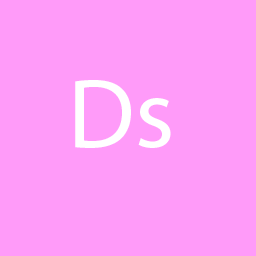
<style>
.page{position:relative;width:256px;height:256px;background:#ff9bf9}
.page>*{position:absolute;margin:0}
.t1{font:100px "MyriadPro-Regular";color:#ffffff}
</style>
<div class="page">
<p class="t1" style="left:75px;top:80px;width:96px;height:68px">Ds</p>
</div>
